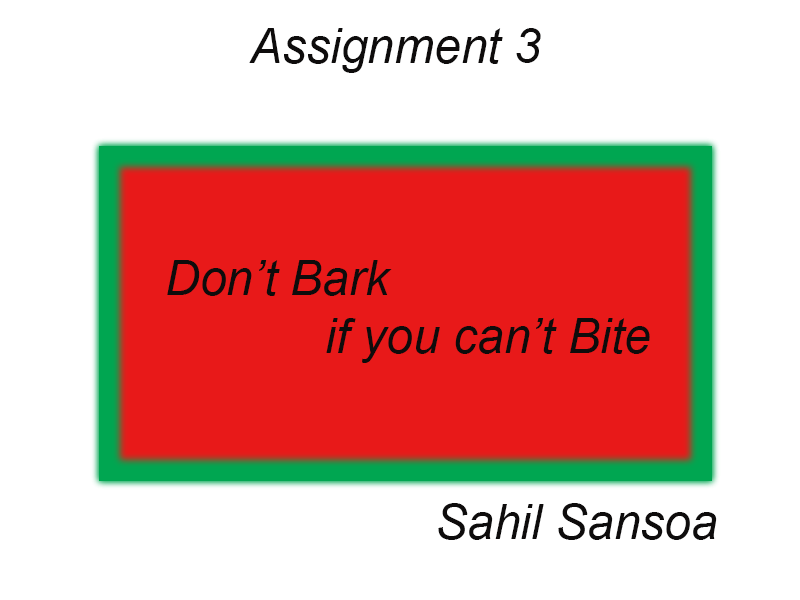
<style>
.page{position:relative;width:800px;height:600px;background:#ffffff}
.page>*{position:absolute;margin:0}
.t1{font:48px "Arial-ItalicMT";color:#0e0c0c}
</style>
<div class="page">
<p class="t1" style="left:249px;top:28px;width:292px;height:45px">Assignment 3</p>
<p class="t1" style="left:167px;top:260px;width:483px;height:103px">Don’t Bark <br>            if you can’t Bite</p>
<p class="t1" style="left:438px;top:503px;width:279px;height:37px">Sahil Sansoa</p>
</div>
